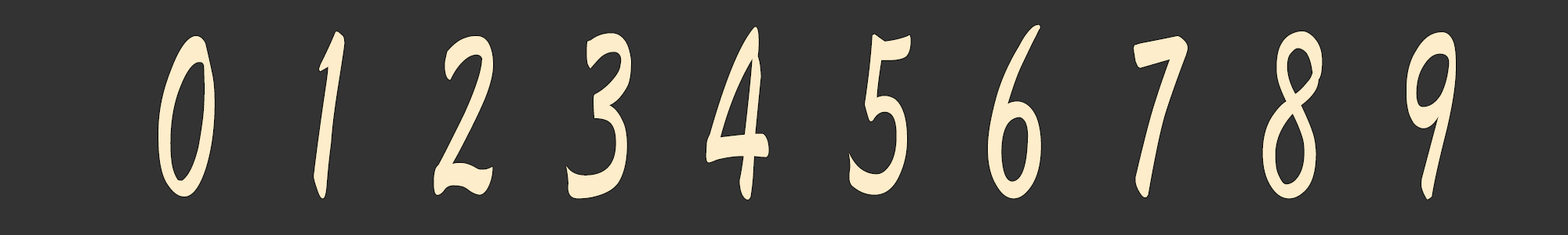
<style>
.page{position:relative;width:1568px;height:235px;background:#333333}
.page>*{position:absolute;margin:0}
.t1{font:236.1px "HGGyoshotai";letter-spacing:0.05em;color:#fdedca;scale:0.56 1}
</style>
<div class="page">
<p class="t1" style="left:158px;top:24px;width:1298px;height:176px">０１２３４５６７８９</p>
</div>
